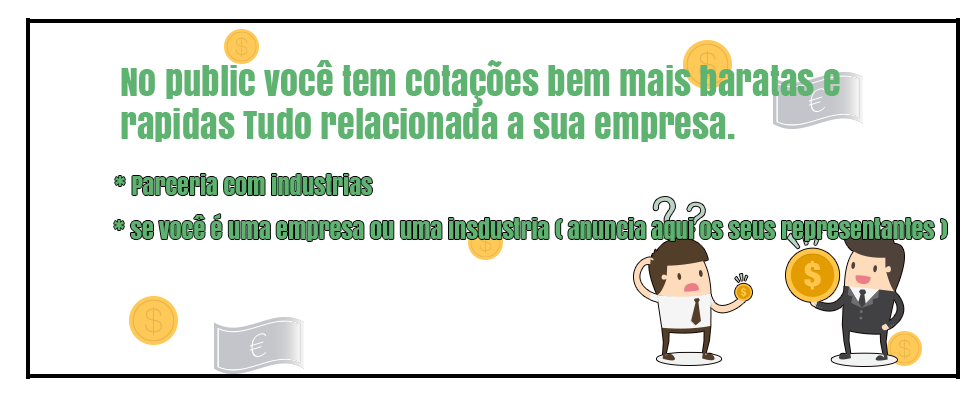
<style>
.page{position:relative;width:980px;height:395px;background:#ffffff}
.page>*{position:absolute;margin:0}
.t1{font:36px "Anton";color:#5fb371}
.t2{font:24px "Anton";color:#5fb371}
</style>
<div class="page">
<p class="t1" style="left:121px;top:60px;width:719px;height:82px">No public você tem cotações bem mais baratas e <br>rapidas Tudo relacionada a sua empresa.</p>
<p class="t2" style="left:115px;top:174px;width:257px;height:21px">* Parceria com industrias</p>
<p class="t2" style="left:114px;top:214px;width:833px;height:27px">* se você é uma empresa ou uma insdustria ( anuncia aqui os seus representantes )</p>
</div>
